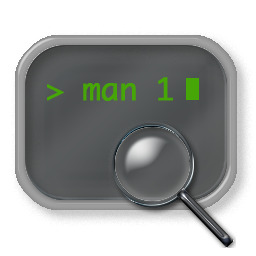
<style>
.page{position:relative;width:256px;height:256px;background:#ffffff}
.page>*{position:absolute;margin:0}
.t1{font:30px "Monaco";letter-spacing:-0.02em;color:#46a507;font-weight:bold}
</style>
<div class="page">
<p class="t1" style="left:47px;top:77px;width:126px;height:24px">&gt; man 1</p>
</div>
